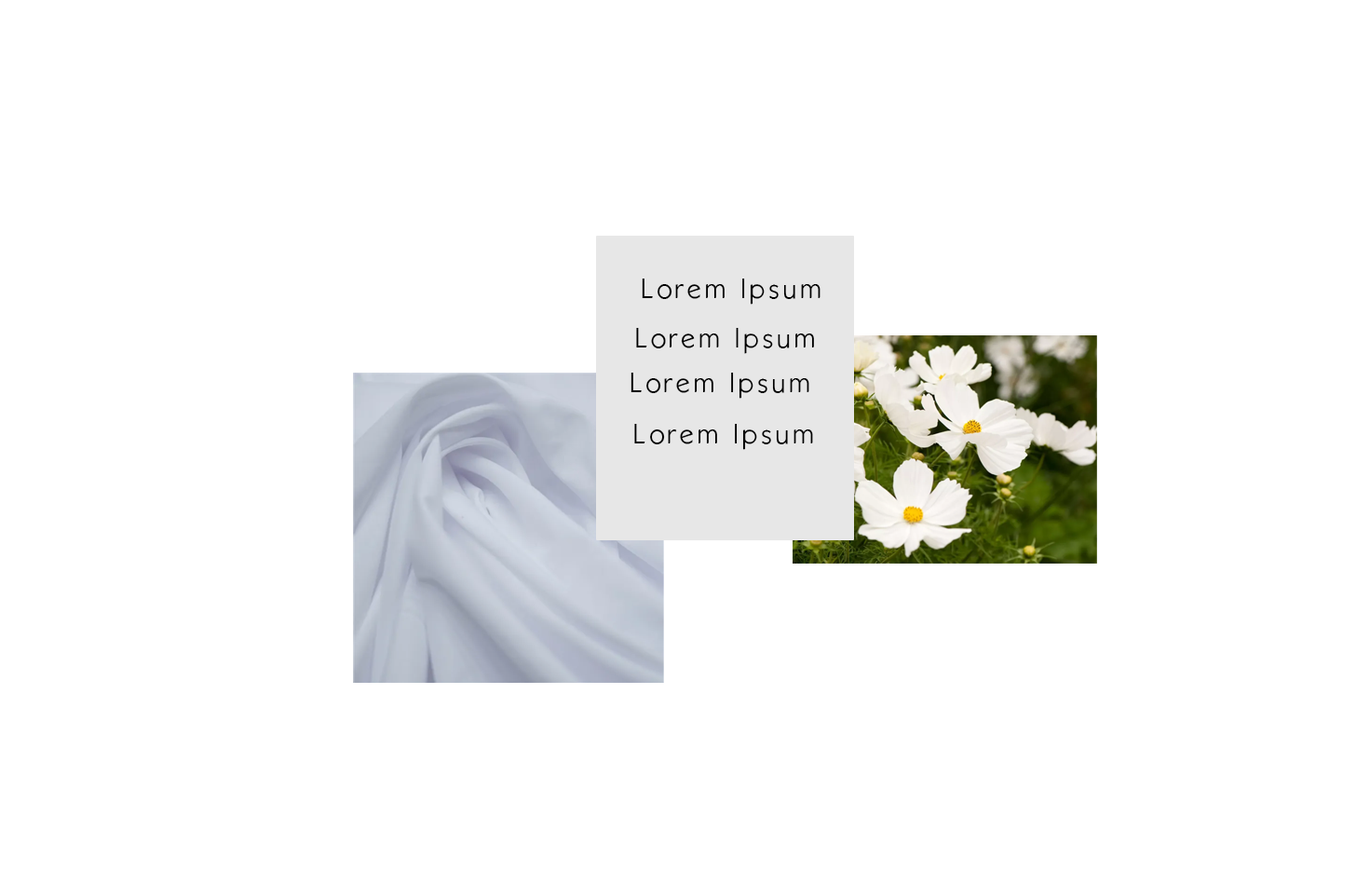
<style>
.page{position:relative;width:1370px;height:871px;background:#ffffff}
.page>*{position:absolute;margin:0}
.t1{font:27.9px "Klill-Light";letter-spacing:0.1em;color:#000000}
</style>
<div class="page">
<p class="t1" style="left:642px;top:278px;width:178px;height:26px">Lorem Ipsum</p>
<p class="t1" style="left:636px;top:328px;width:178px;height:26px">Lorem Ipsum</p>
<p class="t1" style="left:630px;top:372px;width:179px;height:27px">Lorem Ipsum</p>
<p class="t1" style="left:634px;top:424px;width:179px;height:26px">Lorem Ipsum</p>
</div>
